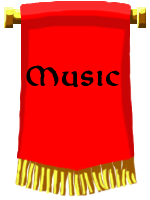
<style>
.page{position:relative;width:150px;height:200px;background:#ff0000}
.page>*{position:absolute;margin:0}
.t1{font:29.2px "DKNorthumbria";letter-spacing:0.05em;color:#000000}
</style>
<div class="page">
<p class="t1" style="left:26px;top:65px;width:94px;height:23px">Music</p>
</div>
